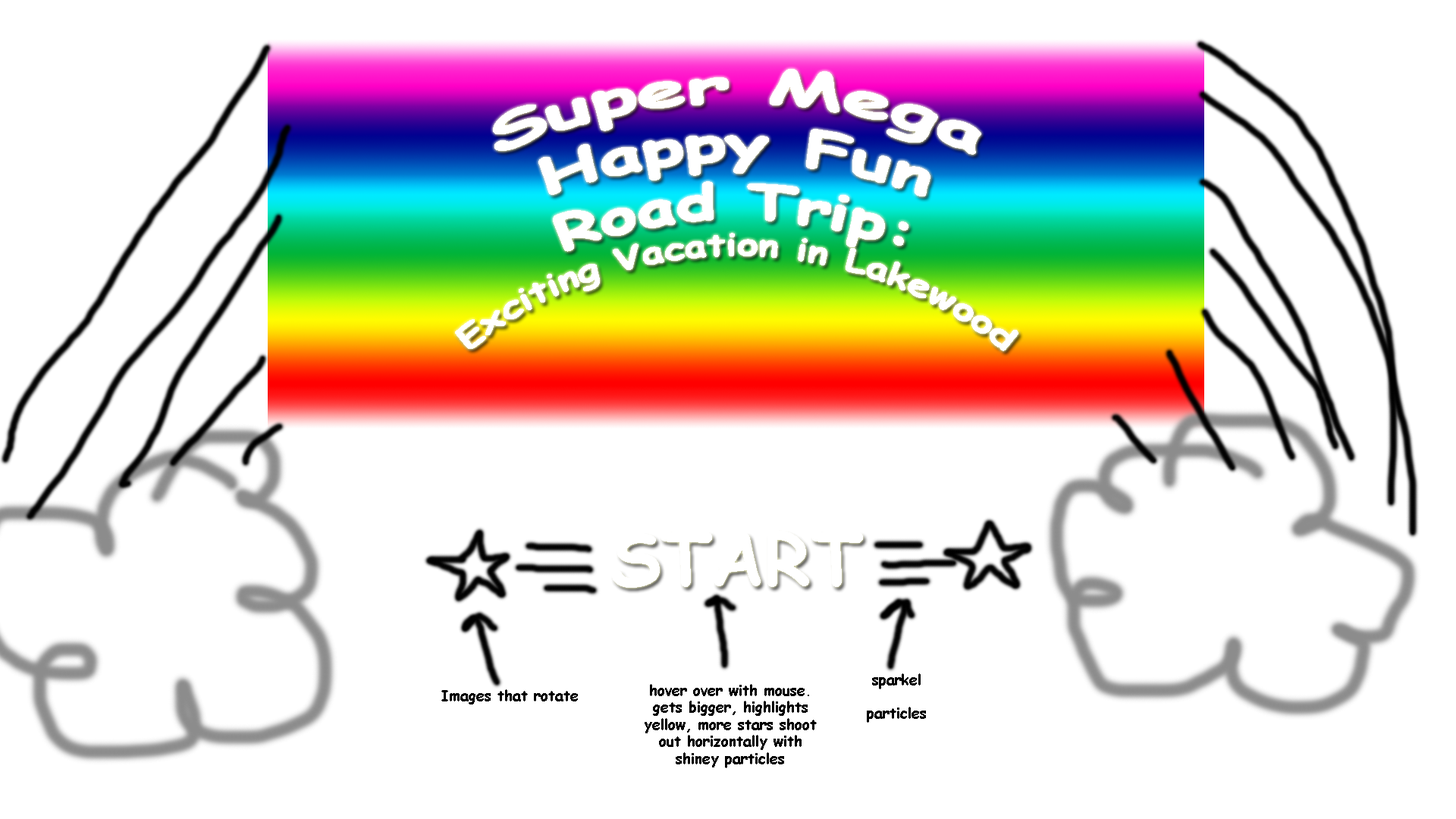
<style>
.page{position:relative;width:1456px;height:819px;background:#ffffff}
.page>*{position:absolute;margin:0}
.t1{font:48.5px "ComicSansMS-Bold";color:#ffffff}
.t2{font:30.3px "ComicSansMS-Bold";color:#ffffff}
.t3{font:14.2px "ComicSansMS-Bold";color:#000000}
</style>
<div class="page">
<p class="t1" style="left:455px;top:69px;width:563px;height:282px;text-align:center">Super Mega<br>Happy Fun<br>Road Trip:<br><span class="t2">Exciting Vacation in Lakewood</span></p>
<p class="t3" style="left:867px;top:673px;width:59px;height:50px;text-align:center">sparkel <br><br>particles</p>
<p class="t3" style="left:441px;top:689px;width:137px;height:15px">Images that rotate</p>
<p class="t3" style="left:645px;top:684px;width:172px;height:84px;text-align:center">hover over with mouse.<br>gets bigger, highlights yellow, more stars shoot out horizontally with shiney particles</p>
</div>
